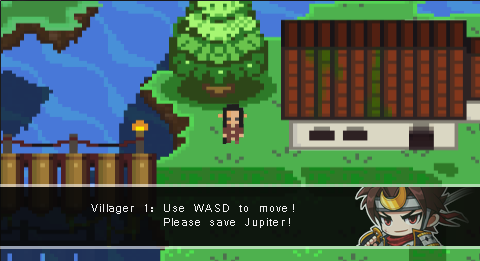
<style>
.page{position:relative;width:480px;height:261px}
.page>*{position:absolute;margin:0}
.t1{font:12px "Vrinda";letter-spacing:0.1em;color:#fefefe}
</style>
<div class="page">
<p class="t1" style="left:91px;top:204px;width:203px;height:24px;opacity:0.9">Villager 1: Use WASD to move! <br>  Please save Jupiter!</p>
</div>
